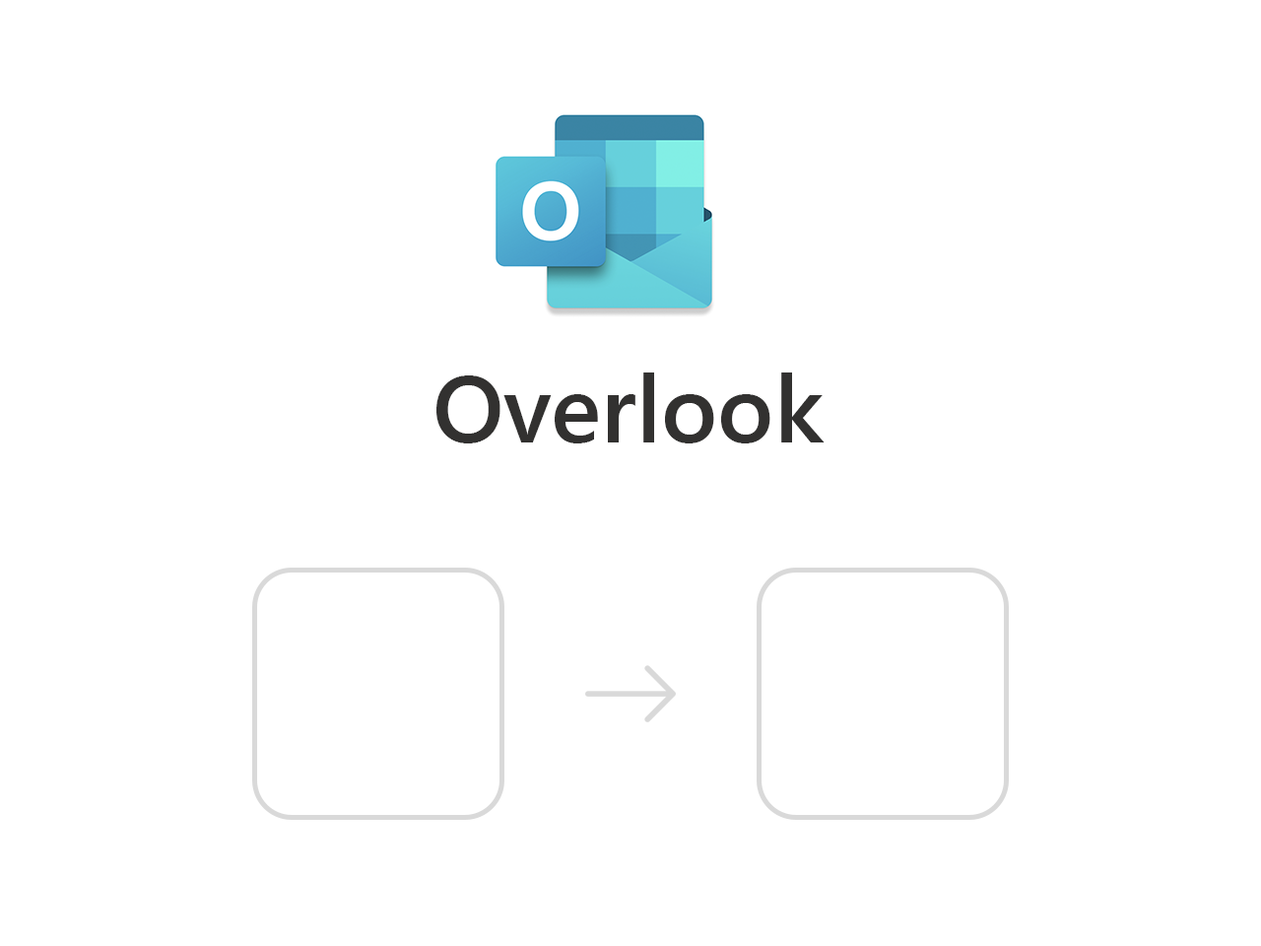
<style>
.page{position:relative;width:1261px;height:946px;background:#ffffff}
.page>*{position:absolute;margin:0}
.t1{font:94.6px "SegoeUI-Semibold";color:#323130}
</style>
<div class="page">
<p class="t1" style="left:436px;top:372px;width:389px;height:71px">Overlook</p>
</div>
